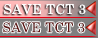
<style>
.page{position:relative;width:100px;height:38px;background:#7f7f7f}
.page>*{position:absolute;margin:0}
.t1{font:13.3px "CenturySchoolbook";letter-spacing:0.025em;color:#ffffff}
.t2{font:13.3px "CenturySchoolbook";letter-spacing:0.025em;color:#5f1816}
</style>
<div class="page">
<p class="t1" style="left:4px;top:4px;width:82px;height:11px">SAVE TCT 3</p>
<p class="t2" style="left:3px;top:22px;width:82px;height:11px">SAVE TCT 3</p>
</div>
